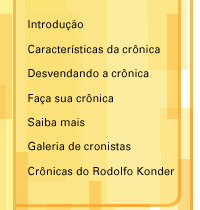
<style>
.page{position:relative;width:200px;height:210px;background:#fce687}
.page>*{position:absolute;margin:0}
.t1{font:11px "Univers";color:#000000}
</style>
<div class="page">
<p class="t1" style="left:28px;top:20px;width:146px;height:156px">Introdução<br><br>Características da crônica <br><br>Desvendando a crônica <br><br>Faça sua crônica<br><br>Saiba mais <br><br>Galeria de cronistas <br><br>Crônicas do Rodolfo Konder</p>
</div>
